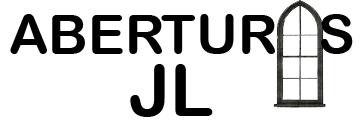
<style>
.page{position:relative;width:363px;height:129px;background:#ffffff}
.page>*{position:absolute;margin:0}
.t1{font:55px "ArialRoundedMTBold";color:#000000}
.t2{font:72px "ArialRoundedMTBold";color:#000000}
</style>
<div class="page">
<p class="t1" style="left:10px;top:14px;width:343px;height:40px">ABERTUR   S</p>
<p class="t2" style="left:130px;top:64px;width:83px;height:53px">JL</p>
</div>
